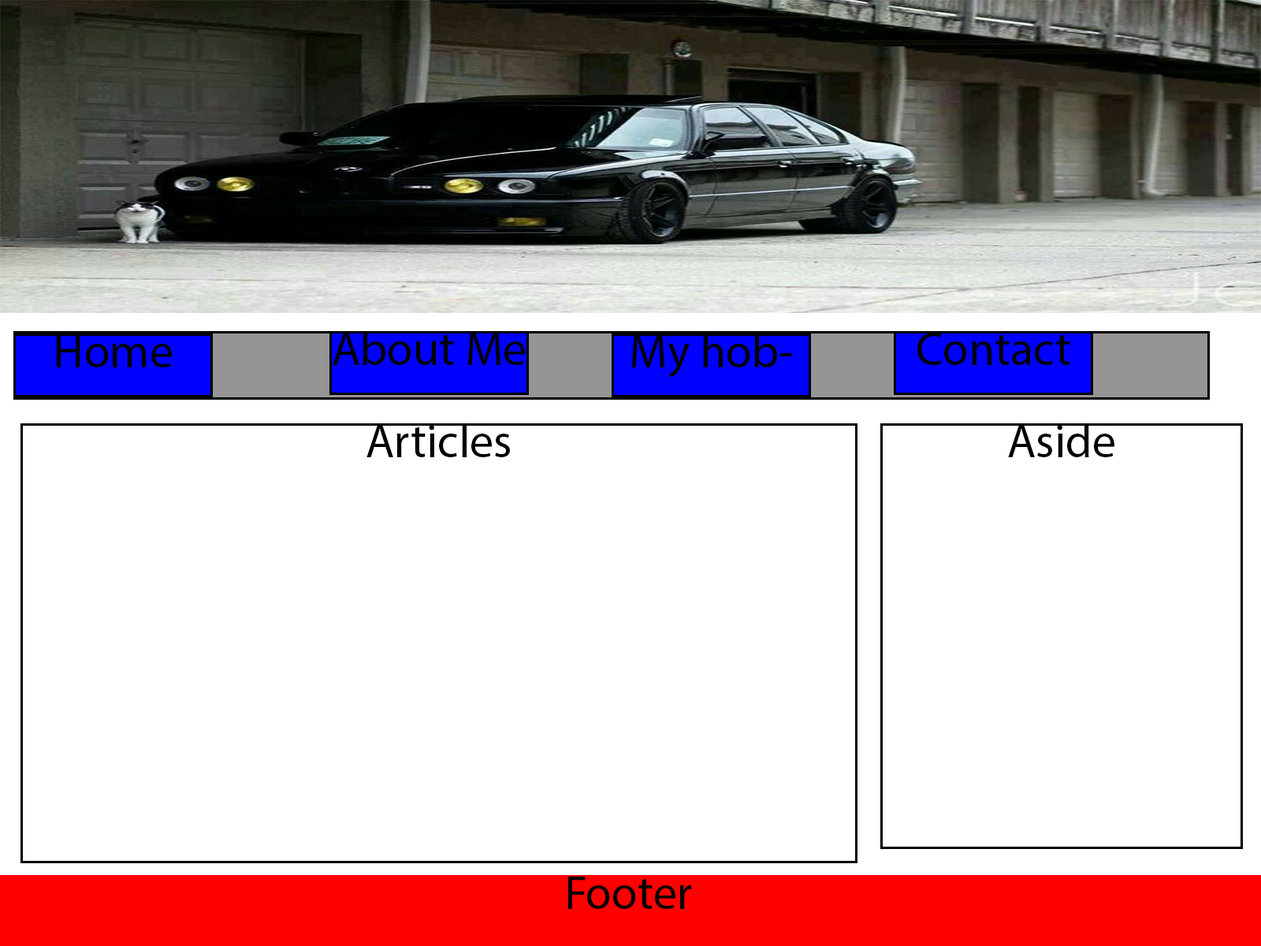
<style>
.page{position:relative;width:1261px;height:946px;background:#ffffff}
.page>*{position:absolute;margin:0}
.t1{font:47.3px "MyriadPro-Regular";color:#000000}
</style>
<div class="page">
<p class="t1" style="left:56px;top:335px;width:116px;height:32px">Home</p>
<p class="t1" style="left:333px;top:331px;width:192px;height:34px">About Me</p>
<p class="t1" style="left:631px;top:333px;width:161px;height:44px">My hobbies</p>
<p class="t1" style="left:917px;top:333px;width:153px;height:32px">Contact me</p>
<p class="t1" style="left:366px;top:423px;width:144px;height:34px">Articles</p>
<p class="t1" style="left:1008px;top:423px;width:106px;height:34px">Aside</p>
<p class="t1" style="left:567px;top:876px;width:125px;height:33px">Footer</p>
</div>
